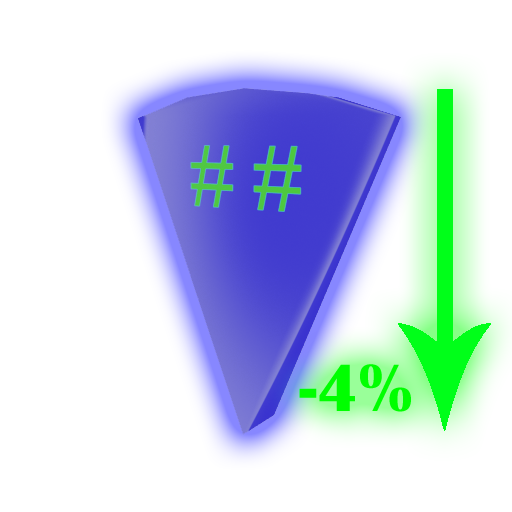
<style>
.page{position:relative;width:512px;height:512px;background:#ffffff}
.page>*{position:absolute;margin:0}
.t1{font:69.4px "BritannicBold";color:#00ff00}
</style>
<div class="page">
<p class="t1" style="left:299px;top:364px;width:112px;height:48px">-4%</p>
</div>
